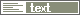
<style>
.page{position:relative;width:80px;height:15px;background:#898e79}
.page>*{position:absolute;margin:0}
.t1{font:12px "ArialRoundedMTBold";letter-spacing:0.05em;color:#ffffff;scale:0.83 1}
</style>
<div class="page">
<p class="t1" style="left:30px;top:2px;width:21px;height:13px">text</p>
</div>
